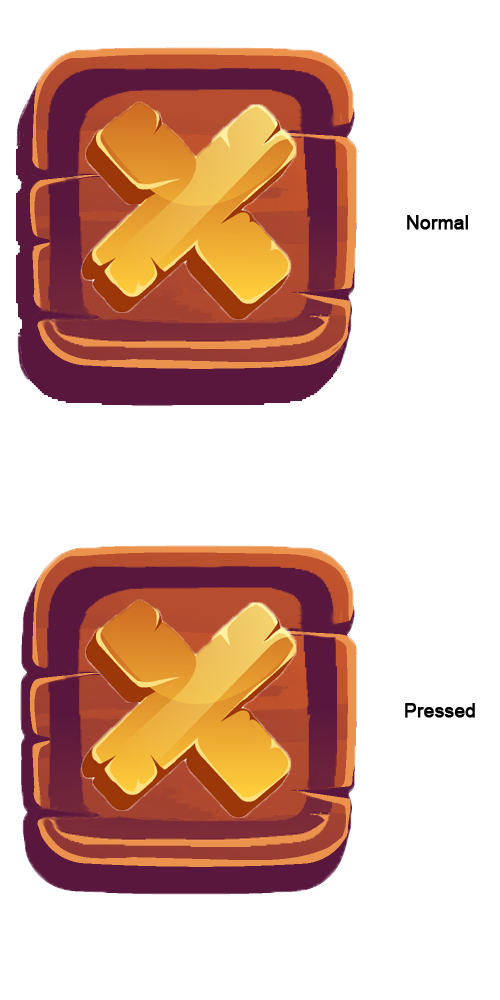
<style>
.page{position:relative;width:500px;height:1000px;background:#ffffff}
.page>*{position:absolute;margin:0}
.t1{font:18.8px "ArialMT";color:#000000;font-weight:bold}
</style>
<div class="page">
<p class="t1" style="left:407px;top:215px;width:61px;height:15px">Normal</p>
<p class="t1" style="left:405px;top:703px;width:70px;height:15px">Pressed</p>
</div>
